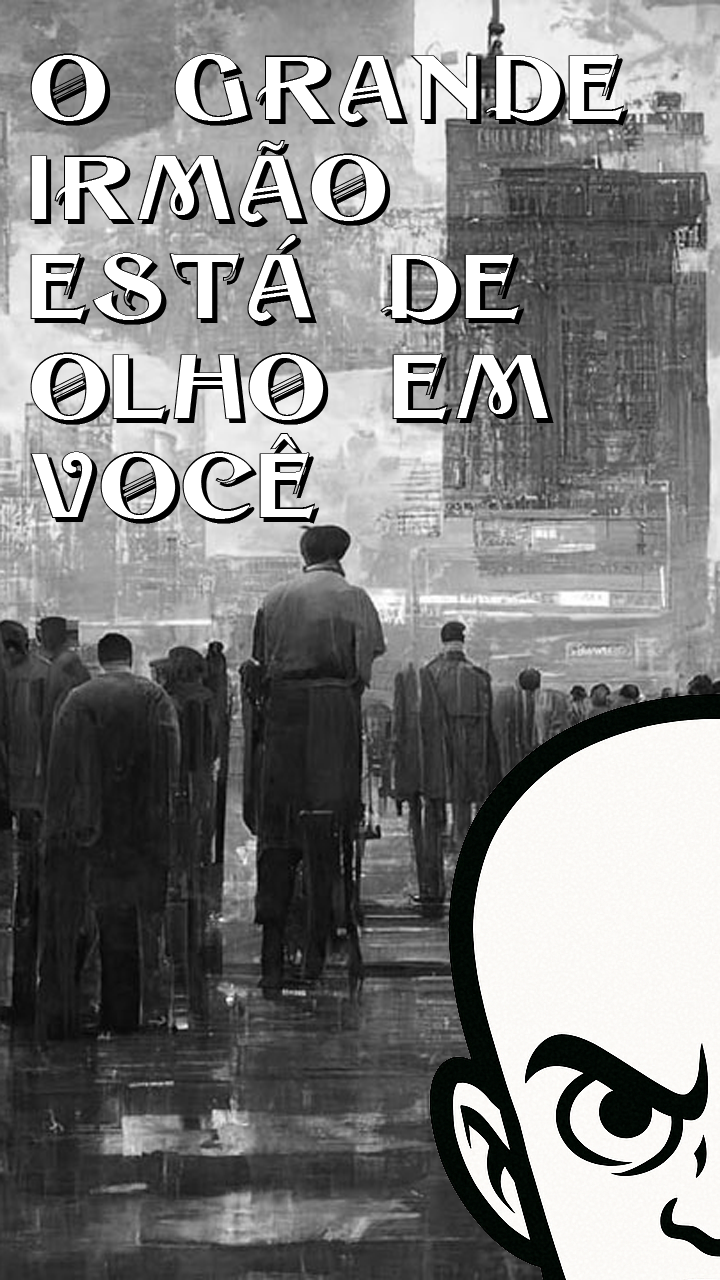
<style>
.page{position:relative;width:720px;height:1280px}
.page>*{position:absolute;margin:0}
.t1{font:80px/99.6px "Sesame-Shadow";color:#000000}
</style>
<div class="page">
<p class="t1" style="left:30px;top:53px;width:598px;height:471px">O GRANDE <br>IRMÃO <br>ESTÁ DE <br>OLHO EM <br>VOCÊ</p>
</div>
